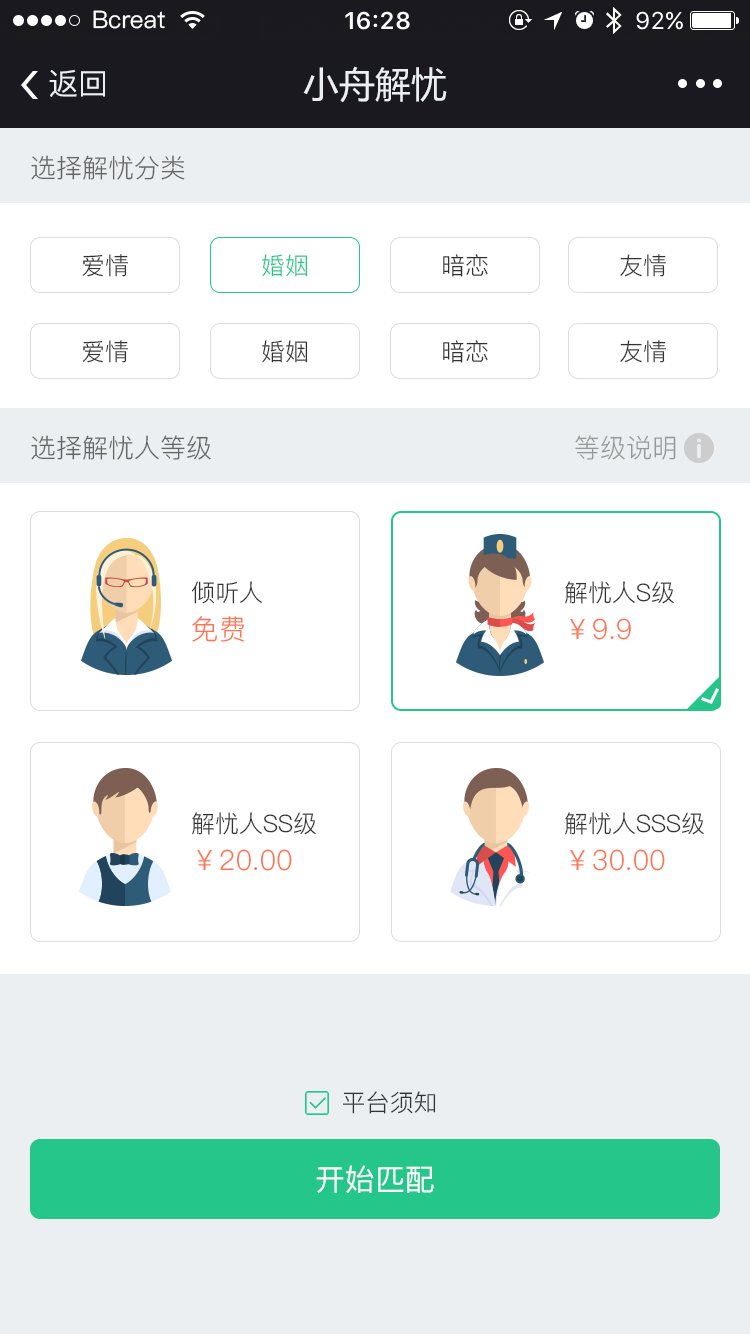
<style>
.page{position:relative;width:750px;height:1334px;background:#ffffff}
.page>*{position:absolute;margin:0}
.t1{font:24px "PingFang-SC-Medium";color:#ffffff}
.t2{font:30px "PingFang-SC-Medium";color:#ffffff}
.t3{font:30px "PingFang-SC-Medium";color:#ebeff1}
.t4{font:36px "MicrosoftYaHei";color:#ffffff}
.t5{font:36px "MicrosoftYaHei";color:#ebeff1}
.t6{font:26px "PingFang-SC-Regular";color:#666666}
.t7{font:24px "PingFang-SC-Regular";color:#333333}
.t8{font:24px "PingFang-SC-Regular";color:#24c789}
.t9{font:26px "PingFang-SC-Regular";color:#999999}
.t10{font:28px "PingFang-SC-Regular";color:#ff7452}
</style>
<div class="page">
<p class="t1" style="left:93px;top:10px;width:72px;height:19px">Bcreat</p>
<p class="t1" style="left:93px;top:10px;width:72px;height:19px">Bcreat</p>
<p class="t1" style="left:93px;top:10px;width:72px;height:19px">Bcreat</p>
<p class="t2" style="left:49px;top:69px;width:56px;height:28px">返回</p>
<p class="t2" style="left:49px;top:69px;width:56px;height:28px">返回</p>
<p class="t3" style="left:49px;top:69px;width:56px;height:28px">返回</p>
<p class="t4" style="left:303px;top:66px;width:144px;height:37px">小舟解忧</p>
<p class="t4" style="left:303px;top:66px;width:144px;height:37px">小舟解忧</p>
<p class="t5" style="left:303px;top:66px;width:144px;height:37px">小舟解忧</p>
<p class="t6" style="left:31px;top:155px;width:154px;height:25px">选择解忧分类</p>
<p class="t6" style="left:31px;top:155px;width:154px;height:25px">选择解忧分类</p>
<p class="t7" style="left:82px;top:254px;width:46px;height:23px">爱情</p>
<p class="t7" style="left:82px;top:254px;width:46px;height:23px">爱情</p>
<p class="t7" style="left:82px;top:254px;width:46px;height:23px">爱情</p>
<p class="t8" style="left:262px;top:254px;width:46px;height:23px">婚姻</p>
<p class="t8" style="left:262px;top:254px;width:46px;height:23px">婚姻</p>
<p class="t8" style="left:262px;top:254px;width:46px;height:23px">婚姻</p>
<p class="t7" style="left:443px;top:254px;width:45px;height:23px">暗恋</p>
<p class="t7" style="left:443px;top:254px;width:45px;height:23px">暗恋</p>
<p class="t7" style="left:443px;top:254px;width:45px;height:23px">暗恋</p>
<p class="t7" style="left:620px;top:254px;width:46px;height:23px">友情</p>
<p class="t7" style="left:620px;top:254px;width:46px;height:23px">友情</p>
<p class="t7" style="left:620px;top:254px;width:46px;height:23px">友情</p>
<p class="t7" style="left:82px;top:340px;width:46px;height:23px">爱情</p>
<p class="t7" style="left:82px;top:340px;width:46px;height:23px">爱情</p>
<p class="t7" style="left:82px;top:340px;width:46px;height:23px">爱情</p>
<p class="t7" style="left:262px;top:340px;width:46px;height:23px">婚姻</p>
<p class="t7" style="left:262px;top:340px;width:46px;height:23px">婚姻</p>
<p class="t7" style="left:262px;top:340px;width:46px;height:23px">婚姻</p>
<p class="t7" style="left:443px;top:340px;width:45px;height:23px">暗恋</p>
<p class="t7" style="left:443px;top:340px;width:45px;height:23px">暗恋</p>
<p class="t7" style="left:443px;top:340px;width:45px;height:23px">暗恋</p>
<p class="t7" style="left:620px;top:340px;width:46px;height:23px">友情</p>
<p class="t7" style="left:620px;top:340px;width:46px;height:23px">友情</p>
<p class="t7" style="left:620px;top:340px;width:46px;height:23px">友情</p>
<p class="t6" style="left:31px;top:435px;width:180px;height:25px">选择解忧人等级</p>
<p class="t6" style="left:31px;top:435px;width:180px;height:25px">选择解忧人等级</p>
<p class="t9" style="left:575px;top:435px;width:101px;height:25px">等级说明</p>
<p class="t9" style="left:575px;top:435px;width:101px;height:25px">等级说明</p>
<p class="t7" style="left:192px;top:581px;width:70px;height:23px">倾听人</p>
<p class="t7" style="left:565px;top:581px;width:109px;height:23px">解忧人S级</p>
<p class="t10" style="left:192px;top:616px;width:52px;height:26px">免费</p>
<p class="t10" style="left:570px;top:618px;width:61px;height:22px">￥9.9</p>
<p class="t7" style="left:192px;top:812px;width:124px;height:23px">解忧人SS级</p>
<p class="t7" style="left:565px;top:812px;width:139px;height:23px">解忧人SSS级</p>
<p class="t10" style="left:197px;top:849px;width:95px;height:22px">￥20.00</p>
<p class="t10" style="left:570px;top:849px;width:95px;height:22px">￥30.00</p>
<p class="t7" style="left:343px;top:1091px;width:93px;height:23px">平台须知</p>
<p class="t2" style="left:316px;top:1165px;width:118px;height:28px">开始匹配</p>
</div>
